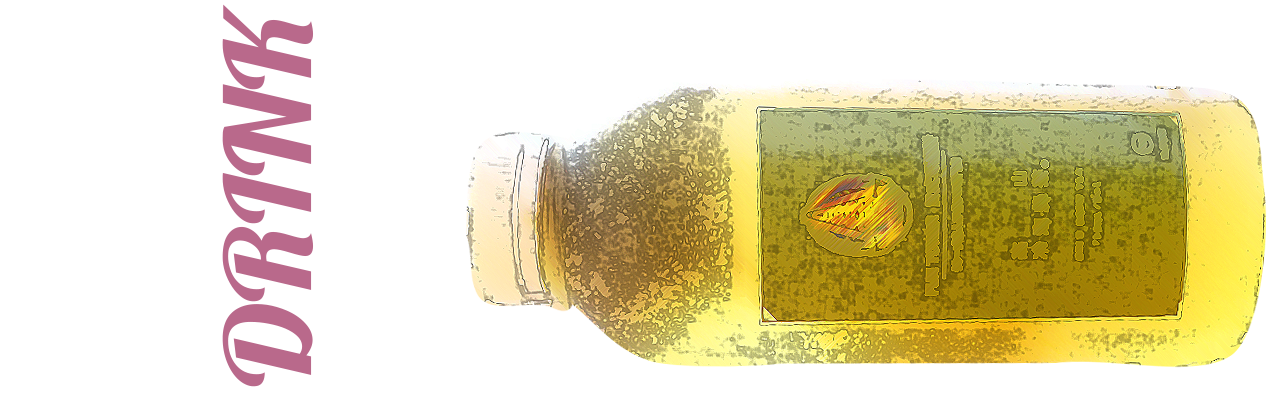
<style>
.page{position:relative;width:1280px;height:393px;background:#ffffff}
.page>*{position:absolute;margin:0}
.t1{font:117.8px "Lobster";color:#b9698b;scale:1.09 1}
</style>
<div class="page">
<p class="t1" style="left:222px;top:4px;width:92px;height:383px;rotate:-90deg">DRINK</p>
</div>
